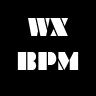
<style>
.page{position:relative;width:96px;height:96px;background:#000000}
.page>*{position:absolute;margin:0}
.t1{font:23.3px/17px "Braggadocio";color:#ffffff;scale:0.84 1}
</style>
<div class="page">
<p class="t1" style="left:17px;top:18px;width:62px;height:52px;text-align:center">WX<br><br>BPM</p>
</div>
